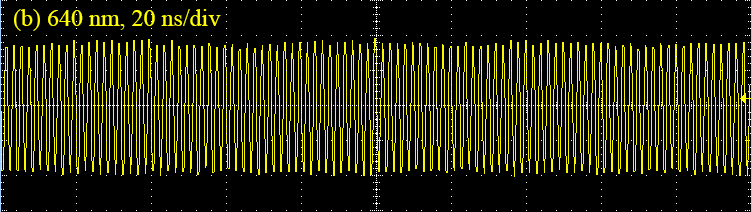
<style>
.page{position:relative;width:752px;height:212px;background:#000000}
.page>*{position:absolute;margin:0}
.t1{font:24px "TimesNewRomanPSMT";color:#ffff00}
</style>
<div class="page">
<p class="t1" style="left:14px;top:9px;width:207px;height:22px">(b) 640 nm, 20 ns/div</p>
</div>
